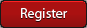
<style>
.page{position:relative;width:87px;height:28px;background:#aa1111}
.page>*{position:absolute;margin:0}
.t1{font:14px "MyriadPro-Regular";color:#ffffff}
</style>
<div class="page">
<p class="t1" style="left:21px;top:8px;width:47px;height:13px">Register</p>
</div>
